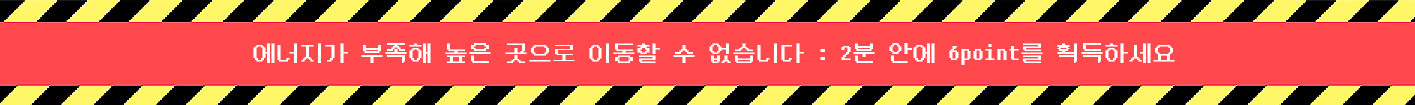
<style>
.page{position:relative;width:1415px;height:105px;background:#ff494c}
.page>*{position:absolute;margin:0}
.t1{font:24px "DungGeunMo";color:#ffffff}
</style>
<div class="page">
<p class="t1" style="left:253px;top:43px;width:922px;height:22px">에너지가 부족해 높은 곳으로 이동할 수 없습니다 : 2분 안에 6point를 획득하세요</p>
</div>
